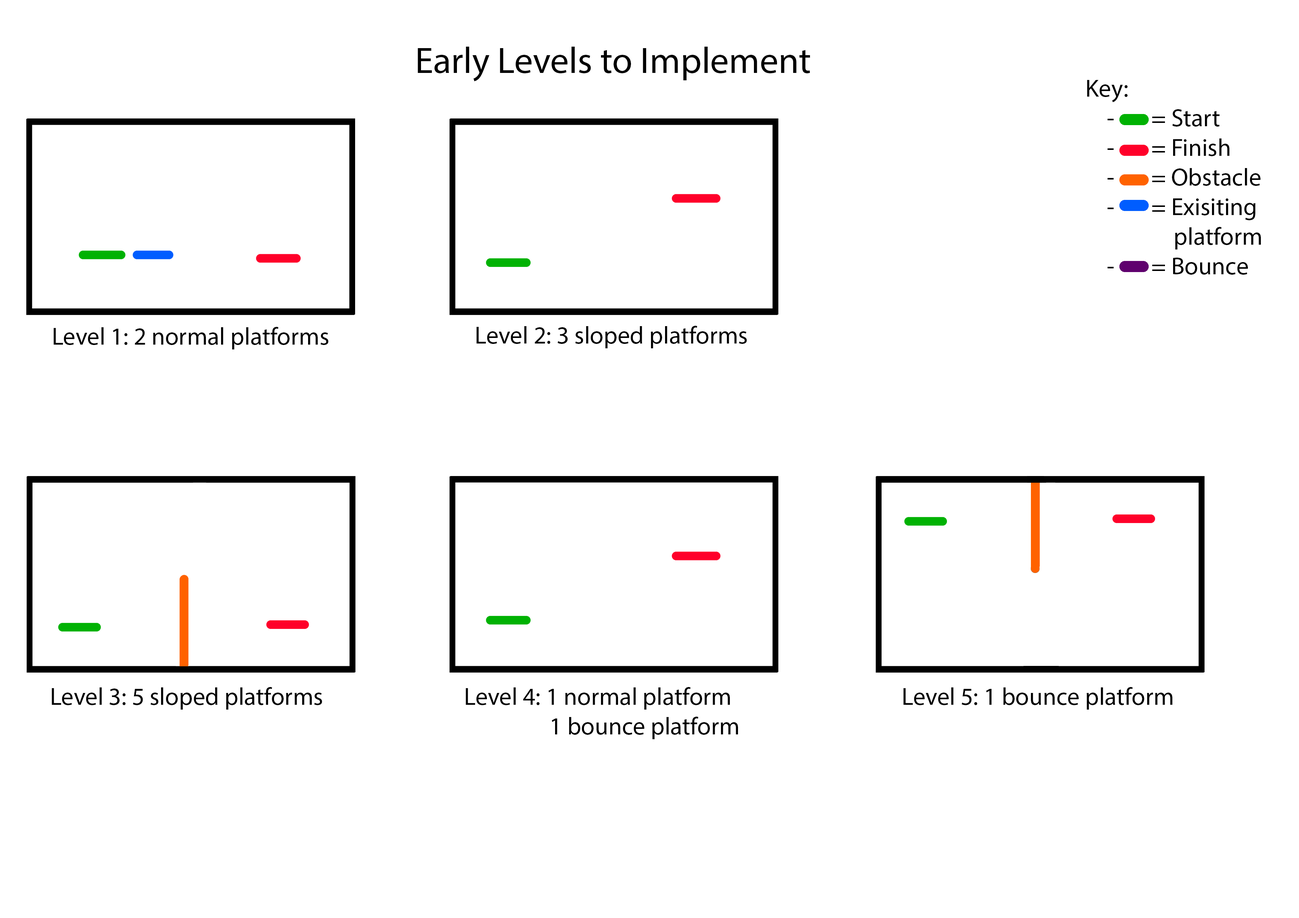
<style>
.page{position:relative;width:1299px;height:918px;background:#ffffff}
.page>*{position:absolute;margin:0}
.t1{font:37px "MyriadPro-Regular";color:#000000}
.t2{font:24.7px "MyriadPro-Regular";color:#000000}
</style>
<div class="page">
<p class="t1" style="left:418px;top:47px;width:392px;height:34px">Early Levels to Implement</p>
<p class="t2" style="left:1087px;top:80px;width:174px;height:195px;text-align:center">Key:<br>-       = Start<br>-       = Finish<br>-       = Obstacle<br>-       = Exisiting <br>     platform<br>-       = Bounce</p>
<p class="t2" style="left:54px;top:327px;width:274px;height:22px">Level 1: 2 normal platforms</p>
<p class="t2" style="left:476px;top:326px;width:271px;height:22px">Level 2: 3 sloped platforms</p>
<p class="t2" style="left:52px;top:687px;width:270px;height:23px">Level 3: 5 sloped platforms</p>
<p class="t2" style="left:466px;top:687px;width:272px;height:52px">Level 4: 1 normal platform<br>       1 bounce platform</p>
<p class="t2" style="left:903px;top:687px;width:269px;height:23px">Level 5: 1 bounce platform</p>
</div>
